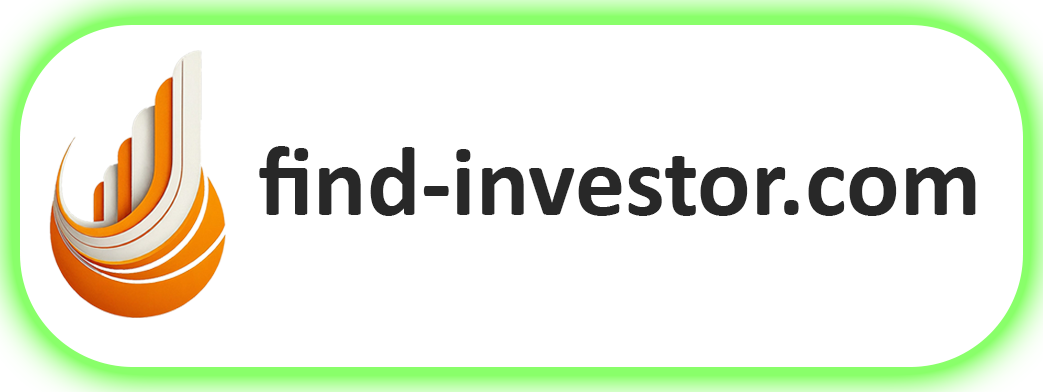
<style>
.page{position:relative;width:1043px;height:392px;background:#ffffff}
.page>*{position:absolute;margin:0}
.t1{font:100px "Calibri-Bold";color:#282828}
</style>
<div class="page">
<p class="t1" style="left:259px;top:146px;width:717px;height:70px">find-investor.com</p>
</div>
